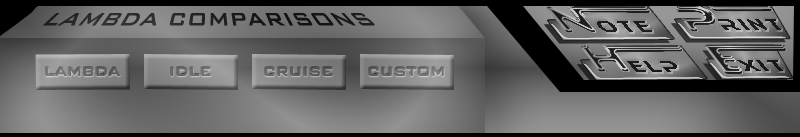
<style>
.page{position:relative;width:800px;height:137px}
.page>*{position:absolute;margin:0}
.t1{font:24px "BankGothicBT-Medium";color:#1f1f1f}
.t2{font:20px "Ethnocentric";letter-spacing:0.2em;color:#1e1e1e;scale:0.77 1}
.t3{font:20px "Ethnocentric";letter-spacing:0.3em;color:#1e1e1e;scale:0.77 1}
.t4{font:20px "Ethnocentric";letter-spacing:0.2em;color:#1d1d1d;scale:0.77 1}
.t5{font:20px "Ethnocentric";letter-spacing:0.2em;color:#1a1a1a;scale:0.77 1}
.t6{font:16px "BankGothicBT-Medium";color:#676767}
.t7{font:16px "BankGothicBT-Medium";color:#6b6b6b}
.t8{font:16px "BankGothicBT-Medium";color:#5c5c5c}
.t9{font:16px "BankGothicBT-Medium";color:#6c6c6c}
</style>
<div class="page">
<p class="t1" style="left:42px;top:13px;width:333px;height:13px">LAMBDA COMPARISONS</p>
<p class="t2" style="left:597px;top:21px;width:55px;height:11px">o<span class="t3">t</span>e</p>
<p class="t4" style="left:718px;top:19px;width:63px;height:11px">RINT</p>
<p class="t5" style="left:627px;top:61px;width:50px;height:11px">ELP</p>
<p class="t5" style="left:737px;top:60px;width:46px;height:11px">XIT</p>
<p class="t6" style="left:46px;top:67px;width:75px;height:9px">LAMBDA</p>
<p class="t7" style="left:171px;top:67px;width:40px;height:9px">IDLE</p>
<p class="t8" style="left:265px;top:67px;width:68px;height:9px">CRUISE</p>
<p class="t9" style="left:369px;top:67px;width:75px;height:9px">CUSTOM</p>
</div>
